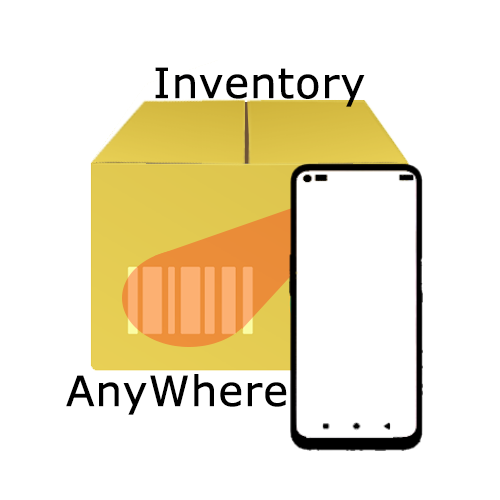
<style>
.page{position:relative;width:500px;height:500px;background:#ffffff}
.page>*{position:absolute;margin:0}
.t1{font:41.7px "Verdana";color:#000000;font-weight:bold}
</style>
<div class="page">
<p class="t1" style="left:155px;top:67px;width:210px;height:40px">Inventory</p>
<p class="t1" style="left:66px;top:374px;width:221px;height:41px">AnyWhere</p>
</div>
